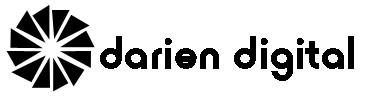
<style>
.page{position:relative;width:367px;height:97px;background:#ffffff}
.page>*{position:absolute;margin:0}
.t1{font:50px "HoratioD-Bold";color:#000000}
</style>
<div class="page">
<p class="t1" style="left:100px;top:36px;width:254px;height:45px">darien digital</p>
</div>
